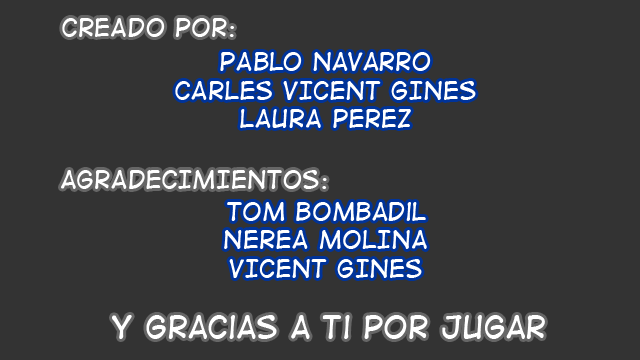
<style>
.page{position:relative;width:640px;height:360px;background:#333333}
.page>*{position:absolute;margin:0}
.t1{font:24px "DigitalStrip";color:#ffffff}
.t2{font:30px "DigitalStrip";color:#ffffff}
</style>
<div class="page">
<p class="t1" style="left:62px;top:18px;width:172px;height:19px">CreADO POR:</p>
<p class="t1" style="left:175px;top:52px;width:301px;height:76px;text-align:center">PAblo Navarro<br>cARLES VICENT GINES<br>LAURA PEREZ</p>
<p class="t1" style="left:61px;top:170px;width:266px;height:19px">aGRADECIMIENTOS:</p>
<p class="t1" style="left:224px;top:202px;width:203px;height:76px;text-align:center">Tom Bombadil<br>nEREA mOLINA<br>vICENT gINES</p>
<p class="t2" style="left:112px;top:315px;width:433px;height:24px">Y gracias a Ti por jugar</p>
</div>
